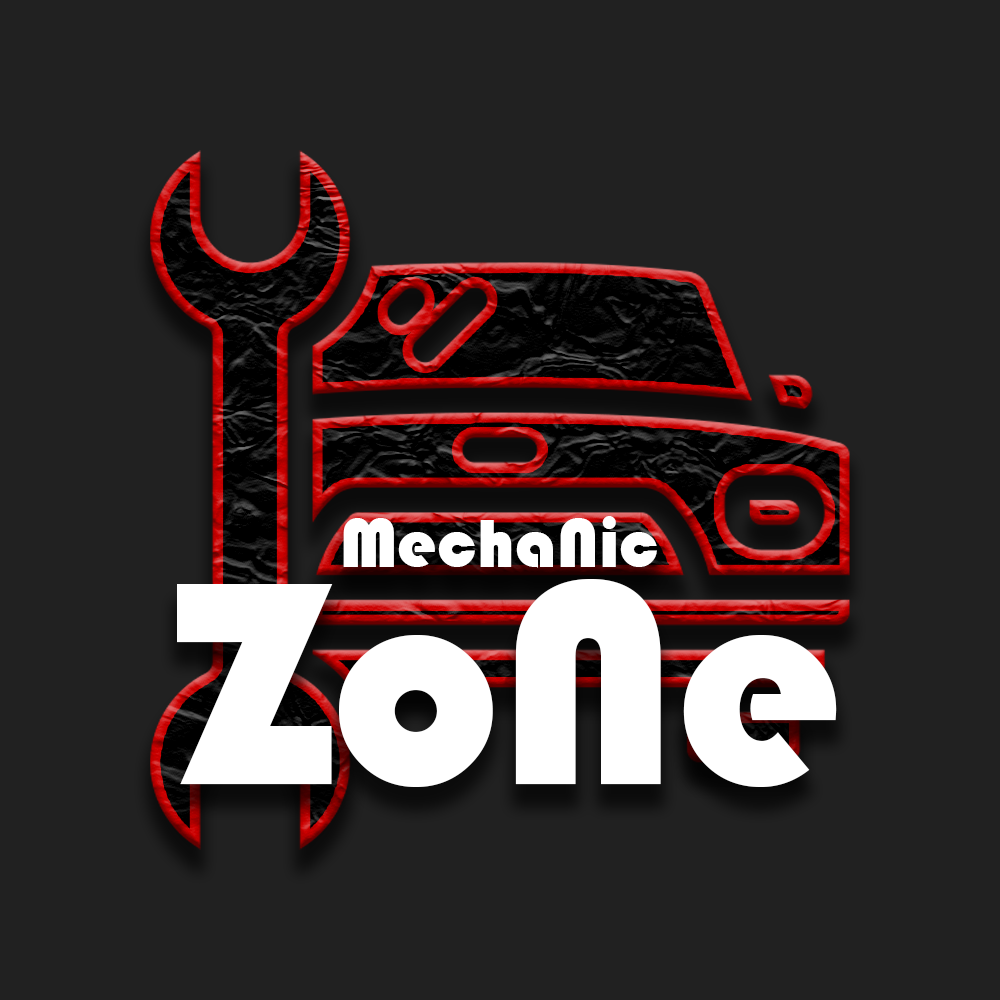
<style>
.page{position:relative;width:1000px;height:1000px;background:#212121}
.page>*{position:absolute;margin:0}
.t1{font:71.2px "Bauhaus93";color:#ffffff}
.t2{font:300px "Bauhaus93";color:#ffffff}
</style>
<div class="page">
<p class="t1" style="left:343px;top:516px;width:314px;height:52px">MechaNic</p>
<p class="t2" style="left:177px;top:579px;width:660px;height:208px">ZoNe</p>
</div>
